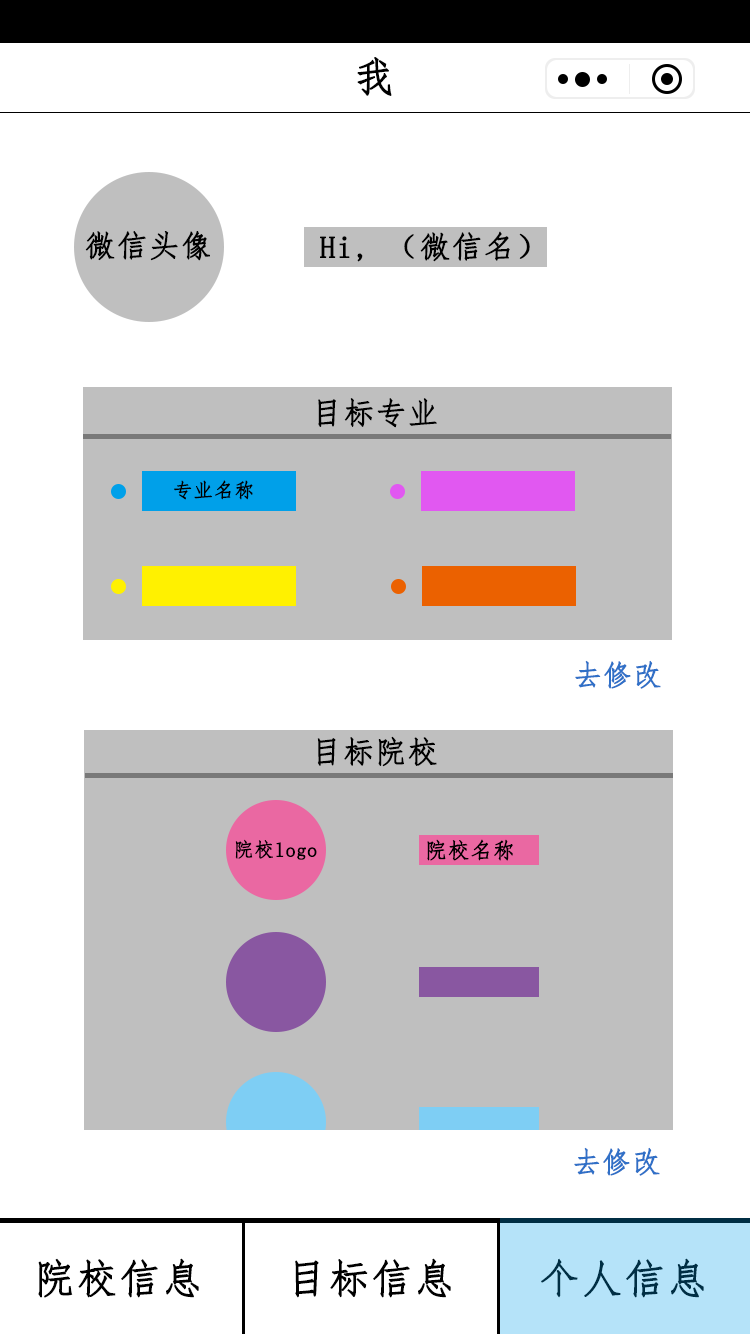
<style>
.page{position:relative;width:750px;height:1334px;background:#ffffff}
.page>*{position:absolute;margin:0}
.t1{font:40.7px "FangSong";letter-spacing:0.02em;color:#000000;font-weight:bold}
.t2{font:30.7px "FangSong";letter-spacing:0.02em;color:#000000;font-weight:bold}
.t3{font:19.7px "FangSong";letter-spacing:0.02em;color:#000000;font-weight:bold}
.t4{font:28.7px "FangSong";letter-spacing:0.02em;color:#3070c7;font-weight:bold}
.t5{font:21.7px "FangSong";letter-spacing:0.02em;color:#000000;font-weight:bold}
.t6{font:40.7px "FangSong";letter-spacing:0.02em;color:#002e44;font-weight:bold}
</style>
<div class="page">
<p class="t1" style="left:357px;top:57px;width:35px;height:39px">我</p>
<p class="t2" style="left:85px;top:231px;width:125px;height:30px">微信头像</p>
<p class="t2" style="left:320px;top:231px;width:210px;height:31px">Hi, （微信名）</p>
<p class="t2" style="left:318px;top:398px;width:119px;height:30px">目标专业</p>
<p class="t3" style="left:174px;top:480px;width:79px;height:20px">专业名称</p>
<p class="t4" style="left:575px;top:660px;width:86px;height:29px">去修改</p>
<p class="t2" style="left:317px;top:736px;width:120px;height:31px">目标院校</p>
<p class="t3" style="left:235px;top:839px;width:82px;height:21px">院校logo</p>
<p class="t5" style="left:427px;top:839px;width:86px;height:22px">院校名称</p>
<p class="t4" style="left:574px;top:1147px;width:86px;height:29px">去修改</p>
<p class="t1" style="left:38px;top:1258px;width:161px;height:40px">院校信息</p>
<p class="t1" style="left:295px;top:1258px;width:156px;height:40px">目标信息</p>
<p class="t6" style="left:541px;top:1258px;width:163px;height:40px">个人信息</p>
</div>
